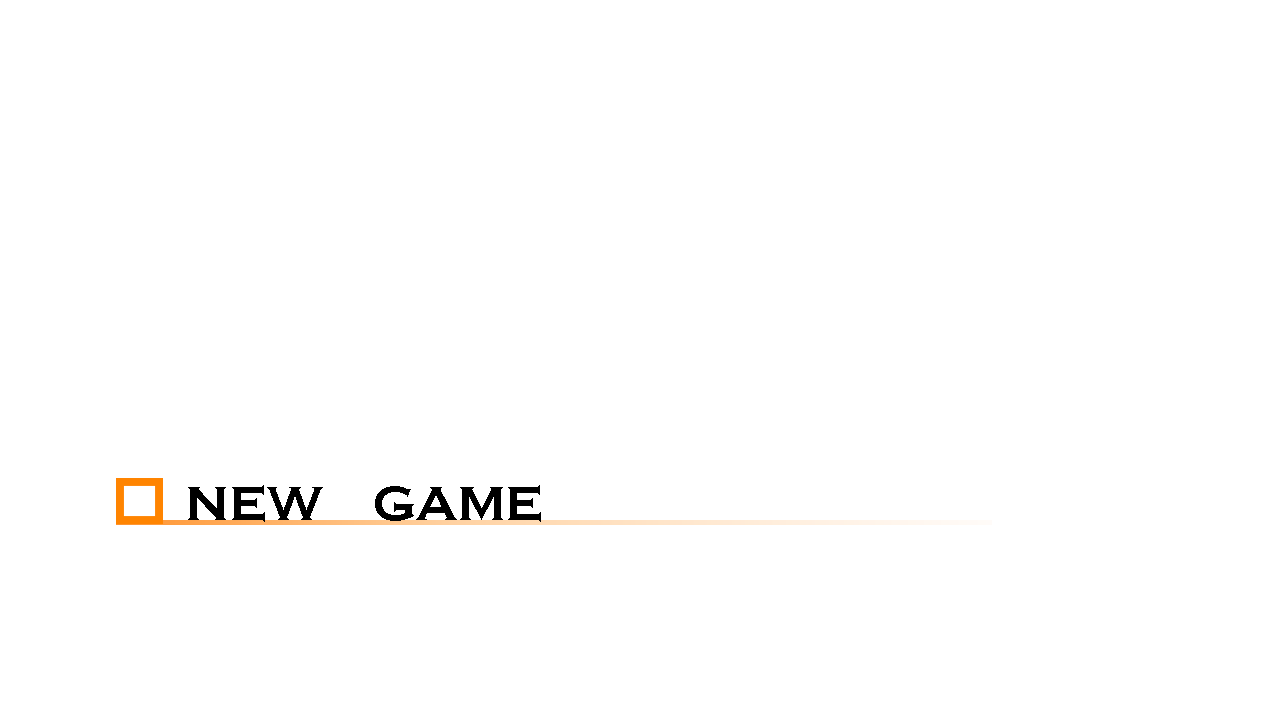
<style>
.page{position:relative;width:1280px;height:720px;background:#ffffff}
.page>*{position:absolute;margin:0}
.t1{font:50px "CopperplateGothic-Bold";color:#000000}
</style>
<div class="page">
<p class="t1" style="left:188px;top:485px;width:353px;height:37px">NEW    GAME</p>
</div>
